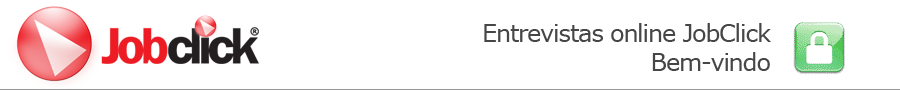
<style>
.page{position:relative;width:900px;height:90px;background:#ffffff}
.page>*{position:absolute;margin:0}
.t1{font:24px "Verdana";letter-spacing:-0.05em;color:#464646}
</style>
<div class="page">
<p class="t1" style="left:484px;top:23px;width:287px;height:48px;text-align:right">Entrevistas online JobClick<br>Bem-vindo</p>
</div>
